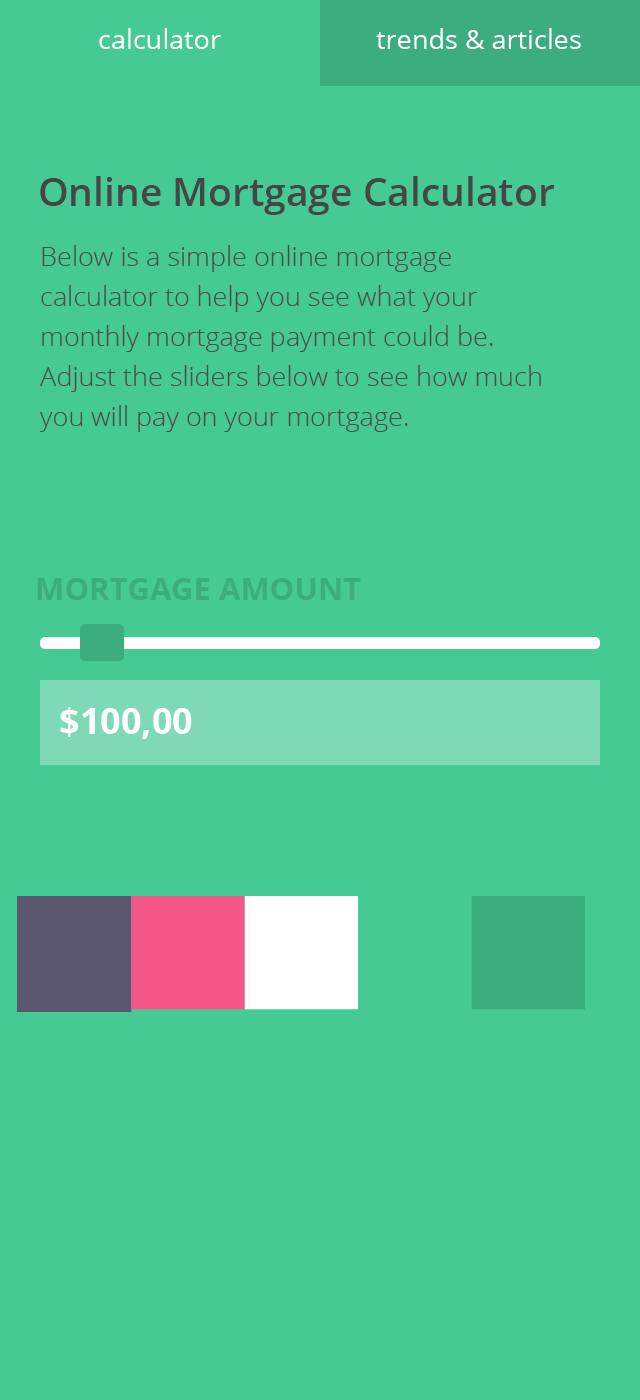
<style>
.page{position:relative;width:640px;height:1400px;background:#46ca93}
.page>*{position:absolute;margin:0}
.t1{font:27px "OpenSans";color:#ffffff}
.t2{font:39px "OpenSans-Semibold";color:#464646}
.t3{font:27px/40px "OpenSans-Light";color:#4d4d4d}
.t4{font:31px "OpenSans-Bold";color:#3cad7e}
.t5{font:36px "OpenSans-Bold";color:#ffffff}
</style>
<div class="page">
<p class="t1" style="left:99px;top:28px;width:122px;height:21px">calculator</p>
<p class="t1" style="left:376px;top:28px;width:205px;height:21px">trends &amp; articles</p>
<p class="t2" style="left:40px;top:176px;width:515px;height:39px">Online Mortgage Calculator</p>
<p class="t3" style="left:39px;top:245px;width:502px;height:187px">Below is a simple online mortgage calculator to help you see what your monthly mortgage payment could be. Adjust the sliders below to see how much you will pay on your mortgage.</p>
<p class="t4" style="left:37px;top:578px;width:324px;height:22px">MORTGAGE AMOUNT</p>
<p class="t5" style="left:60px;top:707px;width:132px;height:32px">$100,00</p>
</div>
